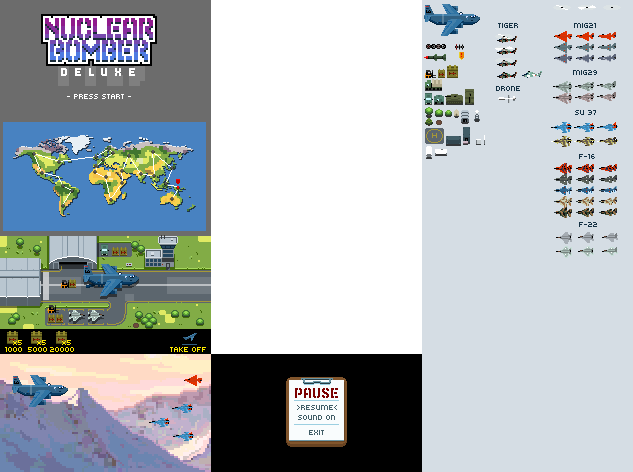
<style>
.page{position:relative;width:633px;height:472px;background:#d5dde4}
.page>*{position:absolute;margin:0}
.t1{font:8px "Kroeger0555";color:#ffffff}
.t2{font:8px "Kroeger0555";color:#ffea00}
.t3{font:12px "EDITION12A";color:#7b0000}
.t4{font:8px "Kroeger0555";color:#415d67}
</style>
<div class="page">
<p class="t1" style="left:67px;top:94px;width:64px;height:5px">- PRESS START -</p>
<p class="t2" style="left:13px;top:340px;width:9px;height:5px">x5</p>
<p class="t2" style="left:37px;top:340px;width:9px;height:5px">x5</p>
<p class="t2" style="left:62px;top:340px;width:9px;height:5px">x5</p>
<p class="t2" style="left:5px;top:347px;width:17px;height:5px">1000</p>
<p class="t2" style="left:28px;top:347px;width:19px;height:5px">5000</p>
<p class="t2" style="left:50px;top:347px;width:24px;height:5px">20000</p>
<p class="t2" style="left:170px;top:347px;width:36px;height:5px">TAKE OFF</p>
<p class="t3" style="left:295px;top:388px;width:43px;height:10px">PAUSE</p>
<p class="t4" style="left:297px;top:405px;width:40px;height:5px">&gt;RESUME&lt;</p>
<p class="t4" style="left:298px;top:415px;width:37px;height:5px">SOUND ON</p>
<p class="t4" style="left:309px;top:430px;width:15px;height:5px">EXIT</p>
</div>
